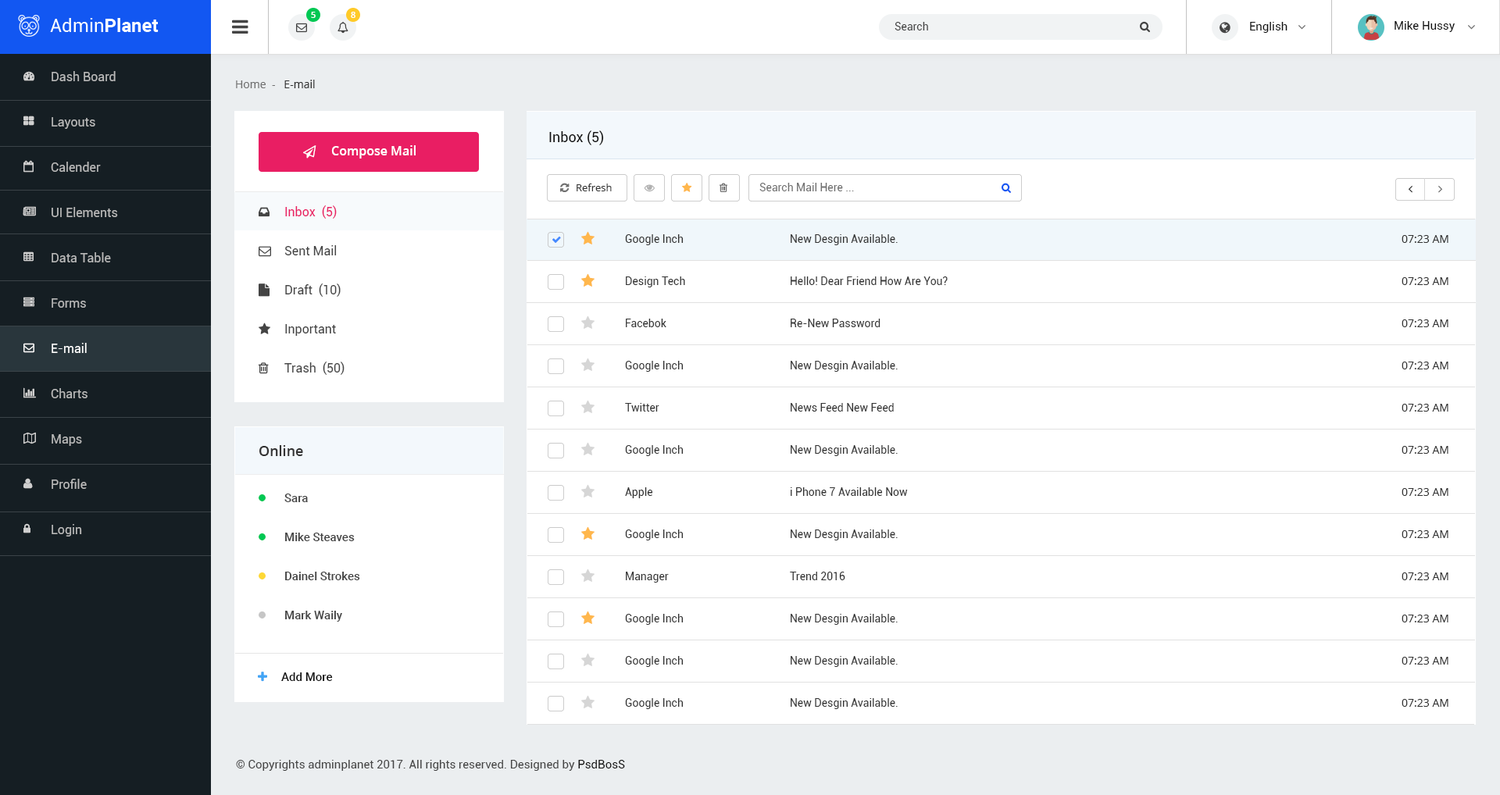
<style>
.page{position:relative;width:1500px;height:795px;background:#ffffff}
.page>*{position:absolute;margin:0}
.t1{font:8.6px "OpenSans-Semibold";color:#ffffff}
.t2{font:10.9px "Roboto-Regular";color:#444444}
.t3{font:11.7px "Roboto-Regular";color:#111111}
.t4{font:12.5px/45.3px "Roboto-Regular";color:#b9b9b9}
.t5{font:12.5px/45.3px "Roboto-Regular";color:#ffffff}
.t6{font:10.9px "OpenSans";color:#707070}
.t7{font:10.9px "OpenSans";color:#333333}
.t8{font:14.1px "Roboto-Regular";color:#111111}
.t9{font:12.5px "OpenSans-Semibold";color:#ffffff}
.t10{font:10.2px "OpenSans";color:#333333}
.t11{font:10.9px "Roboto-Regular";color:#707070}
.t12{font:12.5px/39.1px "Roboto-Regular";color:#444444}
.t13{font:12.5px/39.1px "Roboto-Regular";color:#e91e63}
.t14{font:10.9px "Roboto-Regular";color:#333333}
.t15{font:14.1px "OpenSans-Semibold";color:#333333}
.t16{font:11.7px/39.1px "Roboto-Medium";color:#444444}
.t17{font:11.7px "Roboto-Medium";color:#111111}
.t18{font:11.7px "Roboto-Regular";color:#444444}
</style>
<div class="page">
<p class="t1" style="left:311px;top:12px;width:5px;height:6px">5</p>
<p class="t1" style="left:351px;top:12px;width:4px;height:6px">8</p>
<p class="t2" style="left:894px;top:22px;width:34px;height:8px">Search</p>
<p class="t3" style="left:1250px;top:22px;width:37px;height:11px">English</p>
<p class="t3" style="left:1394px;top:21px;width:60px;height:11px">Mike Hussy</p>
<p class="t4" style="left:51px;top:71px;width:67px;height:466px">Dash Board<br>Layouts<br>Calender<br>UI Elements<br>Data Table<br>Forms<br><span class="t5">E-mail<br></span>Charts<br>Maps<br>Profile<br>Login</p>
<p class="t6" style="left:236px;top:80px;width:79px;height:8px">Home  -  <span class="t7"> E-mail</span></p>
<p class="t8" style="left:549px;top:130px;width:55px;height:15px">Inbox (5)</p>
<p class="t9" style="left:331px;top:145px;width:85px;height:14px">Compose Mail</p>
<p class="t10" style="left:576px;top:184px;width:36px;height:7px">Refresh</p>
<p class="t11" style="left:759px;top:183px;width:95px;height:8px">Search Mail Here ...</p>
<p class="t12" style="left:284px;top:205px;width:60px;height:170px"><span class="t13">Inbox  (5)<br></span>Sent Mail<br>Draft  (10)<br>Inportant<br>Trash  (50)</p>
<p class="t14" style="left:625px;top:234px;width:58px;height:11px">Google Inch</p>
<p class="t14" style="left:790px;top:234px;width:107px;height:11px">New Desgin Available.</p>
<p class="t7" style="left:1401px;top:235px;width:47px;height:8px">07:23 AM</p>
<p class="t14" style="left:626px;top:277px;width:59px;height:10px">Design Tech</p>
<p class="t14" style="left:790px;top:277px;width:157px;height:8px">Hello! Dear Friend How Are You?</p>
<p class="t7" style="left:1401px;top:277px;width:47px;height:8px">07:23 AM</p>
<p class="t14" style="left:626px;top:319px;width:40px;height:8px">Facebok</p>
<p class="t14" style="left:790px;top:319px;width:90px;height:8px">Re-New Password</p>
<p class="t7" style="left:1401px;top:319px;width:47px;height:8px">07:23 AM</p>
<p class="t14" style="left:625px;top:361px;width:58px;height:11px">Google Inch</p>
<p class="t14" style="left:790px;top:361px;width:107px;height:11px">New Desgin Available.</p>
<p class="t7" style="left:1401px;top:362px;width:47px;height:7px">07:23 AM</p>
<p class="t14" style="left:625px;top:403px;width:34px;height:9px">Twitter</p>
<p class="t14" style="left:790px;top:403px;width:104px;height:9px">News Feed New Feed</p>
<p class="t7" style="left:1401px;top:404px;width:47px;height:8px">07:23 AM</p>
<p class="t15" style="left:259px;top:445px;width:44px;height:11px">Online</p>
<p class="t14" style="left:625px;top:445px;width:58px;height:11px">Google Inch</p>
<p class="t14" style="left:790px;top:445px;width:107px;height:11px">New Desgin Available.</p>
<p class="t7" style="left:1401px;top:446px;width:47px;height:8px">07:23 AM</p>
<p class="t16" style="left:284px;top:494px;width:76px;height:128px">Sara <br>Mike Steaves<br>Dainel Strokes<br>Mark Waily</p>
<p class="t14" style="left:625px;top:487px;width:28px;height:11px">Apple</p>
<p class="t14" style="left:790px;top:487px;width:118px;height:9px">i Phone 7 Available Now</p>
<p class="t7" style="left:1401px;top:488px;width:47px;height:8px">07:23 AM</p>
<p class="t14" style="left:625px;top:530px;width:58px;height:11px">Google Inch</p>
<p class="t14" style="left:790px;top:530px;width:107px;height:11px">New Desgin Available.</p>
<p class="t7" style="left:1401px;top:530px;width:47px;height:8px">07:23 AM</p>
<p class="t14" style="left:626px;top:572px;width:43px;height:11px">Manager</p>
<p class="t14" style="left:790px;top:572px;width:55px;height:8px">Trend 2016</p>
<p class="t7" style="left:1401px;top:573px;width:47px;height:7px">07:23 AM</p>
<p class="t14" style="left:625px;top:614px;width:58px;height:11px">Google Inch</p>
<p class="t14" style="left:790px;top:614px;width:107px;height:11px">New Desgin Available.</p>
<p class="t7" style="left:1401px;top:615px;width:47px;height:8px">07:23 AM</p>
<p class="t14" style="left:625px;top:656px;width:58px;height:11px">Google Inch</p>
<p class="t14" style="left:790px;top:656px;width:107px;height:11px">New Desgin Available.</p>
<p class="t7" style="left:1401px;top:657px;width:47px;height:8px">07:23 AM</p>
<p class="t17" style="left:281px;top:673px;width:52px;height:8px">Add More</p>
<p class="t14" style="left:625px;top:698px;width:58px;height:11px">Google Inch</p>
<p class="t14" style="left:790px;top:698px;width:107px;height:11px">New Desgin Available.</p>
<p class="t7" style="left:1401px;top:699px;width:47px;height:8px">07:23 AM</p>
<p class="t18" style="left:236px;top:760px;width:389px;height:11px">© Copyrights adminplanet 2017. All rights reserved. Designed by <span class="t3">PsdBosS</span></p>
</div>
